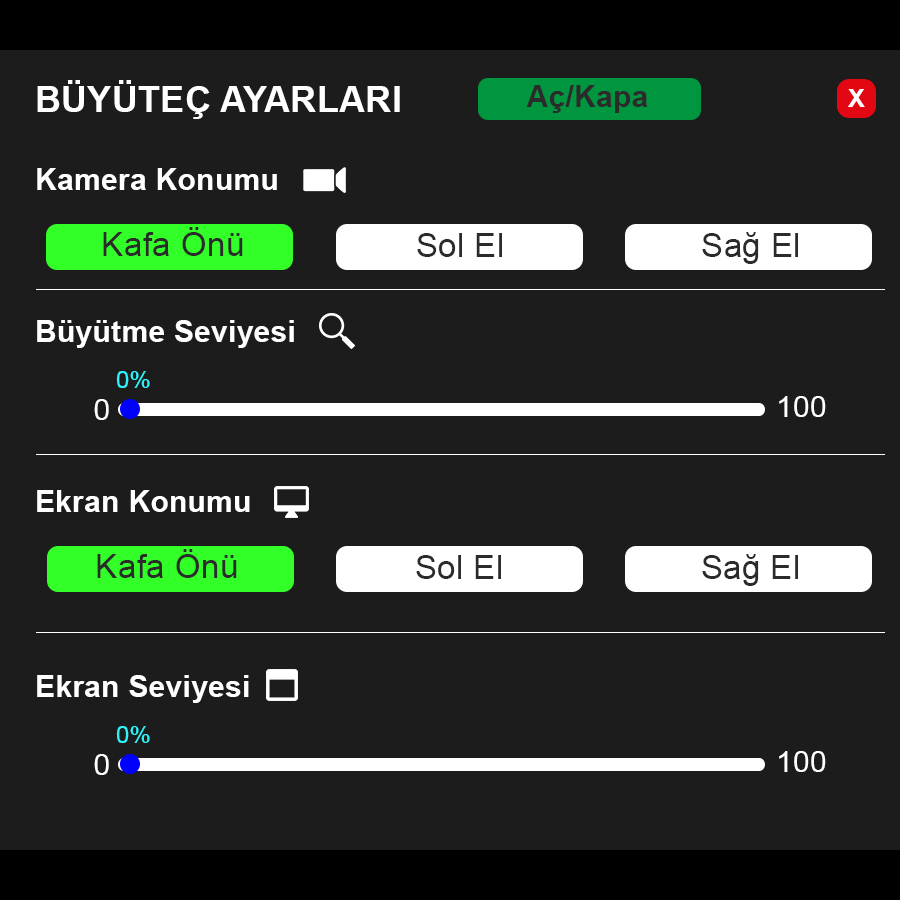
<style>
.page{position:relative;width:900px;height:900px;background:#1c1c1c}
.page>*{position:absolute;margin:0}
.t1{font:35.6px "Arial-BoldMT";letter-spacing:0.01em;color:#ffffff}
.t2{font:30px "Arial-BoldMT";letter-spacing:0.01em;color:#2b2b2b}
.t3{font:25.1px "Arial-BoldMT";letter-spacing:0.01em;color:#ffffff}
.t4{font:30px "Arial-BoldMT";letter-spacing:0.01em;color:#ffffff}
.t5{font:33px "ArialMT";letter-spacing:0.01em;color:#2b2b2b}
.t6{font:23.8px "ArialMT";letter-spacing:0.01em;color:#2ef2f9}
.t7{font:29.3px "ArialMT";letter-spacing:0.01em;color:#ffffff}
</style>
<div class="page">
<p class="t1" style="left:37px;top:80px;width:363px;height:39px">BÜYÜTEÇ AYARLARI</p>
<p class="t2" style="left:526px;top:85px;width:122px;height:28px">Aç/Kapa</p>
<p class="t3" style="left:848px;top:89px;width:17px;height:18px">X</p>
<p class="t4" style="left:37px;top:168px;width:240px;height:22px">Kamera Konumu</p>
<p class="t5" style="left:103px;top:227px;width:140px;height:29px">Kafa Önü</p>
<p class="t5" style="left:417px;top:233px;width:85px;height:24px">Sol El</p>
<p class="t5" style="left:702px;top:232px;width:96px;height:32px">Sağ El</p>
<p class="t4" style="left:37px;top:320px;width:257px;height:28px">Büyütme Seviyesi</p>
<p class="t6" style="left:116px;top:371px;width:34px;height:17px">0%</p>
<p class="t7" style="left:94px;top:399px;width:15px;height:21px">0</p>
<p class="t7" style="left:779px;top:396px;width:47px;height:21px">100</p>
<p class="t4" style="left:37px;top:490px;width:213px;height:22px">Ekran Konumu</p>
<p class="t5" style="left:97px;top:549px;width:140px;height:29px">Kafa Önü</p>
<p class="t5" style="left:416px;top:555px;width:85px;height:24px">Sol El</p>
<p class="t5" style="left:702px;top:554px;width:96px;height:32px">Sağ El</p>
<p class="t4" style="left:37px;top:675px;width:212px;height:28px">Ekran Seviyesi</p>
<p class="t6" style="left:116px;top:726px;width:34px;height:17px">0%</p>
<p class="t7" style="left:94px;top:754px;width:15px;height:21px">0</p>
<p class="t7" style="left:779px;top:751px;width:47px;height:21px">100</p>
</div>
